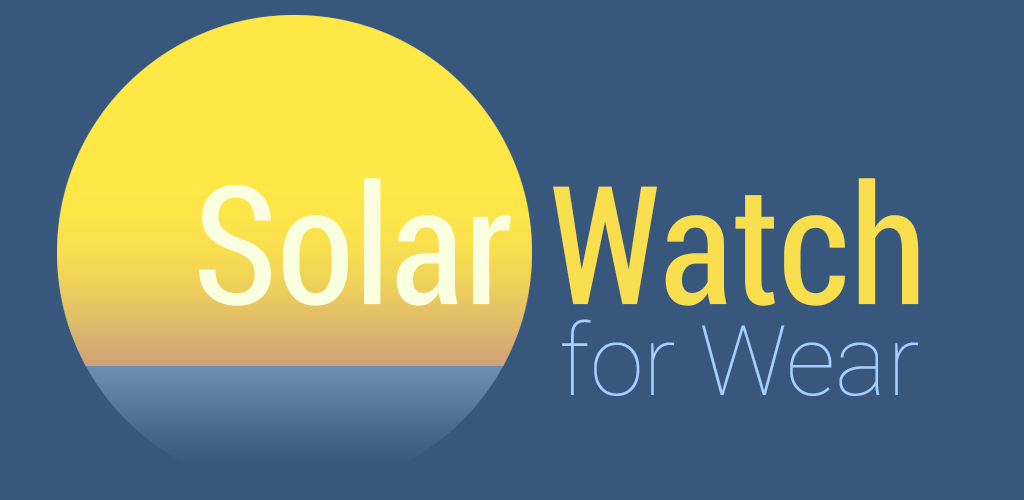
<style>
.page{position:relative;width:1024px;height:500px;background:#37577d}
.page>*{position:absolute;margin:0}
.t1{font:164.8px "RobotoCondensed-Regular";color:#faffe0}
.t2{font:164.8px "RobotoCondensed-Regular";color:#f9df4e}
.t3{font:97.7px "Roboto-Thin";color:#a6cfff}
</style>
<div class="page">
<p class="t1" style="left:199px;top:178px;width:720px;height:128px">Solar <span class="t2">Watch</span></p>
<p class="t3" style="left:562px;top:319px;width:357px;height:77px">for Wear</p>
</div>
